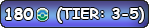
<style>
.page{position:relative;width:149px;height:28px}
.page>*{position:absolute;margin:0}
.t1{font:12px "ComicSansMS-Bold";color:#ffffff}
.t2{font:14.7px "ComicSansMS-Bold";color:#ffffff}
</style>
<div class="page">
<p class="t1" style="left:5px;top:8px;width:29px;height:12px">180</p>
<p class="t2" style="left:57px;top:7px;width:87px;height:16px">(TIER: 3-5)</p>
</div>
